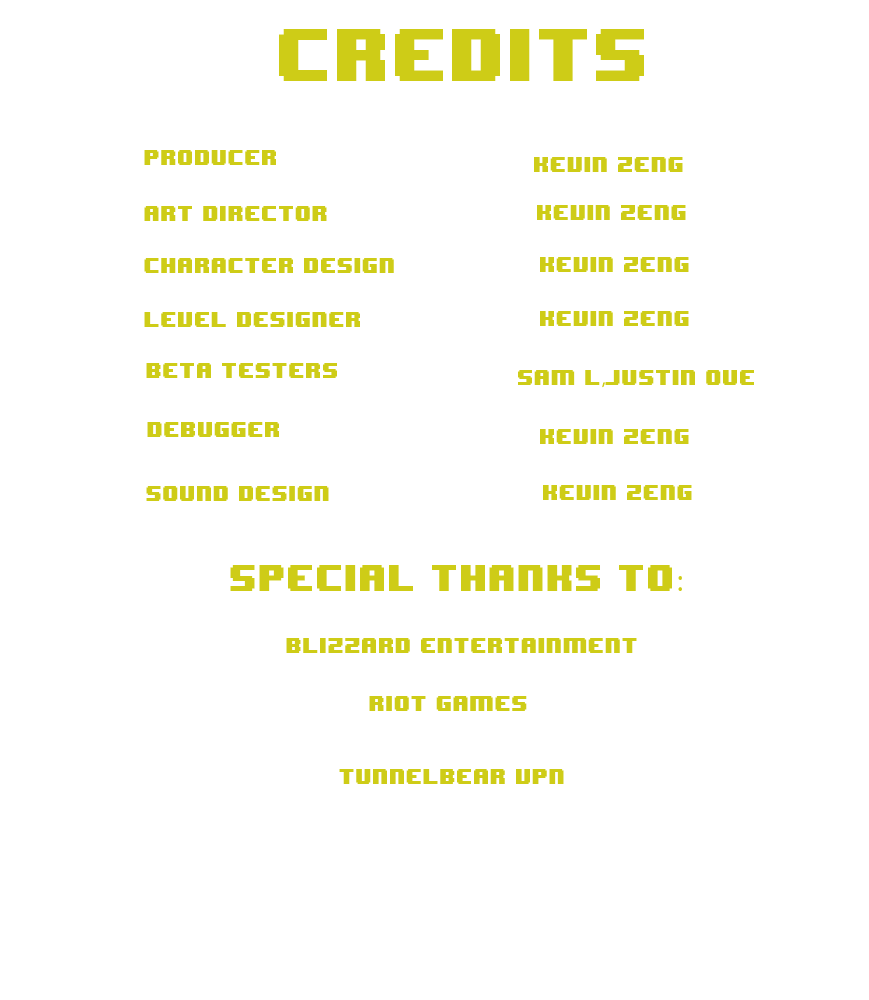
<style>
.page{position:relative;width:869px;height:1000px;background:#ffffff}
.page>*{position:absolute;margin:0}
.t1{font:62.1px "8BITWONDERNominal";color:#cecc17;scale:0.93 1}
.t2{font:18.1px "8BITWONDERNominal";color:#cecc17;scale:0.93 1}
.t3{font:18.1px "MyriadPro-Regular";color:#cecc17;scale:0.93 1}
.t4{font:31px "8BITWONDERNominal";color:#cecc17;scale:0.93 1}
.t5{font:31px "MyriadPro-Regular";color:#cecc17;scale:0.93 1}
</style>
<div class="page">
<p class="t1" style="left:279px;top:29px;width:365px;height:52px">Credits</p>
<p class="t2" style="left:144px;top:150px;width:132px;height:15px">Producer</p>
<p class="t2" style="left:534px;top:157px;width:149px;height:15px">kevin zeng</p>
<p class="t2" style="left:144px;top:206px;width:183px;height:15px">Art Director</p>
<p class="t2" style="left:537px;top:205px;width:149px;height:15px">kevin zeng</p>
<p class="t2" style="left:540px;top:257px;width:149px;height:15px">kevin zeng</p>
<p class="t2" style="left:144px;top:258px;width:250px;height:15px">Character Design</p>
<p class="t2" style="left:144px;top:312px;width:216px;height:15px">Level designer</p>
<p class="t2" style="left:540px;top:311px;width:149px;height:15px">kevin zeng</p>
<p class="t2" style="left:146px;top:363px;width:191px;height:15px">Beta Testers</p>
<p class="t2" style="left:518px;top:370px;width:236px;height:18px">Sam L<span class="t3">,</span>Justin oue</p>
<p class="t2" style="left:147px;top:422px;width:132px;height:15px">Debugger</p>
<p class="t2" style="left:540px;top:429px;width:149px;height:15px">kevin zeng</p>
<p class="t2" style="left:146px;top:486px;width:183px;height:15px">Sound design</p>
<p class="t2" style="left:543px;top:485px;width:149px;height:15px">kevin zeng</p>
<p class="t4" style="left:230px;top:565px;width:452px;height:26px">Special Thanks to<span class="t5">:</span></p>
<p class="t2" style="left:286px;top:638px;width:351px;height:15px">Blizzard Entertainment</p>
<p class="t2" style="left:369px;top:696px;width:158px;height:15px">Riot Games</p>
<p class="t2" style="left:339px;top:769px;width:225px;height:15px">TunnelBear VPN</p>
</div>
